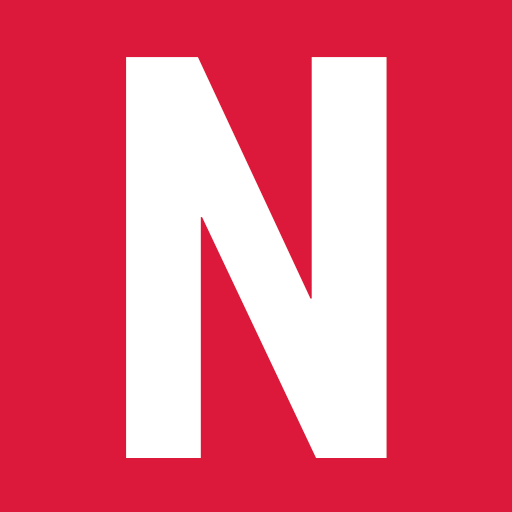
<style>
.page{position:relative;width:512px;height:512px;background:#dc193a}
.page>*{position:absolute;margin:0}
.t1{font:562.5px "DINCondensed-Bold";color:#ffffff;scale:1.3 1}
</style>
<div class="page">
<p class="t1" style="left:126px;top:57px;width:261px;height:401px">Ν</p>
</div>
